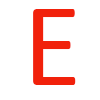
<style>
.page{position:relative;width:100px;height:100px;background:#ffffff}
.page>*{position:absolute;margin:0}
.t1{font:120px "Calibri";color:#f1210b}
</style>
<div class="page">
<p class="t1" style="left:33px;top:9px;width:43px;height:76px">E</p>
</div>
